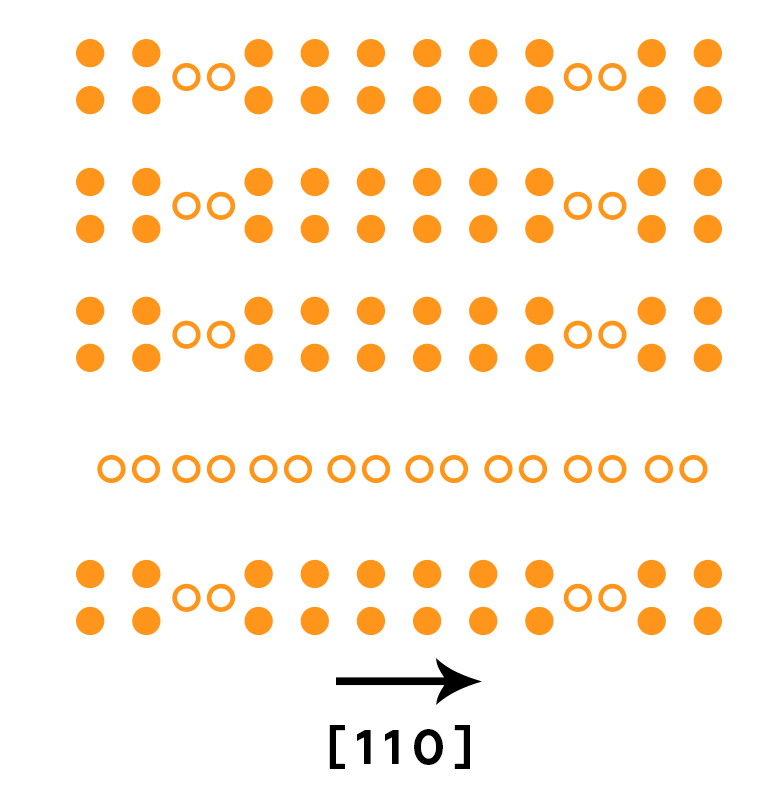
<style>
.page{position:relative;width:781px;height:789px;background:#ffffff}
.page>*{position:absolute;margin:0}
.t1{font:48px "Geometria-Bold";letter-spacing:0.19em;color:#000000;text-transform:uppercase}
</style>
<div class="page">
<p class="t1" style="left:329px;top:725px;width:141px;height:44px">[110]</p>
</div>
